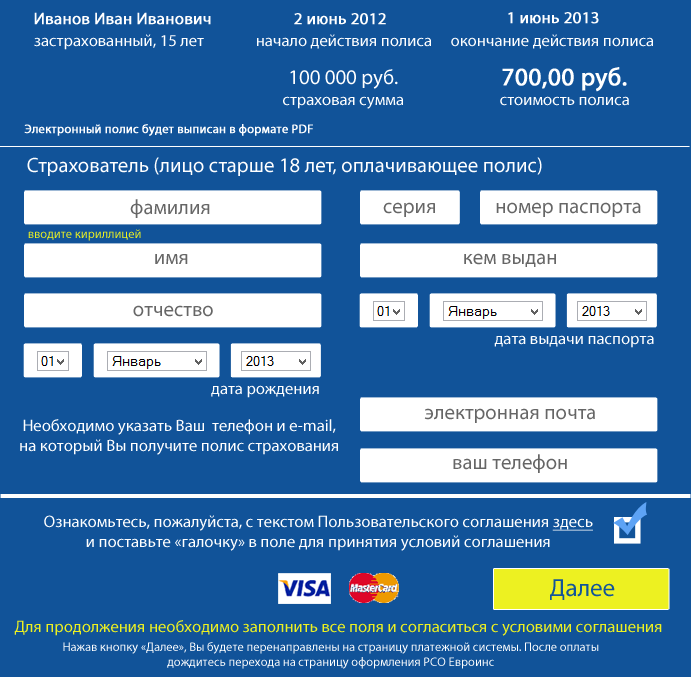
<style>
.page{position:relative;width:691px;height:677px;background:#115399}
.page>*{position:absolute;margin:0}
.t1{font:16.7px "MyriadPro-Regular";color:#ffffff;font-weight:bold}
.t2{font:16.7px "MyriadPro-Regular";color:#ffffff}
.t3{font:20.8px "MyriadPro-Regular";color:#ffffff}
.t4{font:25px "MyriadPro-Regular";color:#ffffff;font-weight:bold}
.t5{font:12.5px "MyriadPro-Regular";color:#ffffff;font-weight:bold}
.t6{font:20.8px "MyriadPro-Regular";color:#666666}
.t7{font:12.5px "MyriadPro-Regular";color:#edf121}
.t8{font:16.7px "MyriadPro-Regular";color:#ffffff;text-decoration:underline}
.t9{font:25px "MyriadPro-Regular";color:#135599}
.t10{font:16.7px "MyriadPro-Regular";color:#edf121}
.t11{font:12.5px "MyriadPro-Regular";color:#ffffff}
</style>
<div class="page">
<p class="t1" style="left:34px;top:12px;width:177px;height:13px">Иванов Иван Иванович</p>
<p class="t1" style="left:294px;top:13px;width:92px;height:12px">2 июнь 2012</p>
<p class="t1" style="left:508px;top:12px;width:91px;height:12px">1 июнь 2013</p>
<p class="t2" style="left:34px;top:34px;width:170px;height:16px">застрахованный, 15 лет</p>
<p class="t2" style="left:257px;top:34px;width:174px;height:15px">начало действия полиса</p>
<p class="t2" style="left:451px;top:34px;width:202px;height:15px">окончание действия полиса</p>
<p class="t3" style="left:290px;top:69px;width:108px;height:20px">100 000 руб.</p>
<p class="t4" style="left:502px;top:67px;width:125px;height:25px">700,00 руб.</p>
<p class="t2" style="left:283px;top:96px;width:120px;height:13px">страховая сумма</p>
<p class="t2" style="left:500px;top:96px;width:129px;height:10px">стоимость полиса</p>
<p class="t5" style="left:24px;top:124px;width:289px;height:12px">Электронный полис будет выписан в формате PDF</p>
<p class="t3" style="left:27px;top:157px;width:515px;height:19px">Страхователь (лицо старше 18 лет, оплачивающее полис)</p>
<p class="t6" style="left:130px;top:199px;width:80px;height:19px">фамилия</p>
<p class="t6" style="left:383px;top:202px;width:52px;height:15px">серия</p>
<p class="t6" style="left:496px;top:202px;width:145px;height:15px">номер паспорта</p>
<p class="t7" style="left:28px;top:229px;width:113px;height:12px">вводите кириллицей</p>
<p class="t6" style="left:155px;top:254px;width:33px;height:10px">имя</p>
<p class="t6" style="left:464px;top:253px;width:92px;height:14px">кем выдан</p>
<p class="t6" style="left:133px;top:305px;width:80px;height:12px">отчество</p>
<p class="t2" style="left:494px;top:335px;width:160px;height:13px">дата выдачи паспорта</p>
<p class="t2" style="left:211px;top:385px;width:108px;height:13px">дата рождения</p>
<p class="t6" style="left:424px;top:408px;width:171px;height:15px">электронная почта</p>
<p class="t2" style="left:20px;top:419px;width:318px;height:36px;text-align:center">Необходимо указать Ваш  телефон и e-mail, на который Вы получите полис страхования</p>
<p class="t6" style="left:453px;top:454px;width:114px;height:19px">ваш телефон</p>
<p class="t2" style="left:44px;top:515px;width:549px;height:36px;text-align:center">Ознакомьтесь, пожалуйста, с текстом Пользовательского соглашения <span class="t8">здесь</span> и поставьте «галочку» в поле для принятия условий соглашения</p>
<p class="t9" style="left:550px;top:579px;width:65px;height:21px">Далее</p>
<p class="t10" style="left:14px;top:620px;width:648px;height:16px">Для продолжения необходимо заполнить все поля и согласиться с условими соглашения</p>
<p class="t11" style="left:63px;top:642px;width:536px;height:27px;text-align:center">Нажав кнопку «Далее», Вы будете перенаправлены на страницу платежной системы. После оплаты дождитесь перехода на страницу оформления РСО Евроинс</p>
</div>
